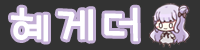
<style>
.page{position:relative;width:200px;height:50px;background:#333333}
.page>*{position:absolute;margin:0}
.t1{font:48px "Goyang";letter-spacing:0.12em;color:#ffffff;font-weight:bold}
</style>
<div class="page">
<p class="t1" style="left:11px;top:7px;width:127px;height:35px">혜게더</p>
</div>
